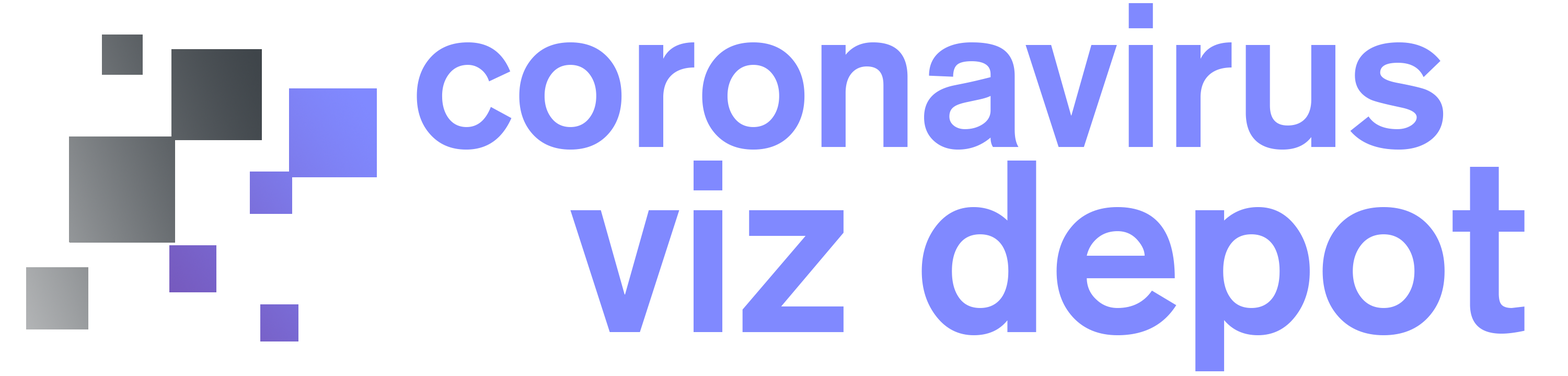
<style>
.page{position:relative;width:1568px;height:376px;background:#ffffff}
.page>*{position:absolute;margin:0}
.t1{font:201.8px "ReznorBroken";color:#8089ff}
.t2{font:240.7px "ReznorBroken";color:#8089ff}
</style>
<div class="page">
<p class="t1" style="left:417px;top:3px;width:1027px;height:146px">coronavirus</p>
<p class="t2" style="left:570px;top:160px;width:955px;height:211px">viz depot</p>
</div>
